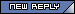
<style>
.page{position:relative;width:75px;height:14px;background:#6179ac}
.page>*{position:absolute;margin:0}
.t1{font:8px "BitDustTwo";color:#ffffff}
</style>
<div class="page">
<p class="t1" style="left:10px;top:4px;width:49px;height:5px">NEW REPLY</p>
</div>
